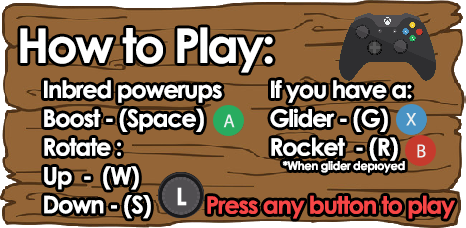
<style>
.page{position:relative;width:466px;height:228px;background:#946537}
.page>*{position:absolute;margin:0}
.t1{font:48px "CenturyGothic-Bold";letter-spacing:-0.05em;color:#ffffff}
.t2{font:24px "CenturyGothic-Bold";letter-spacing:-0.05em;color:#ffffff}
.t3{font:12px "CenturyGothic-Bold";letter-spacing:-0.05em;color:#ffffff}
.t4{font:24px "CenturyGothic-Bold";letter-spacing:-0.05em;color:#f64646}
</style>
<div class="page">
<p class="t1" style="left:20px;top:27px;width:253px;height:46px">How to Play:</p>
<p class="t2" style="left:44px;top:80px;width:178px;height:139px">Inbred powerups<br>Boost - (Space)<br>Rotate :<br>Up  -  (W)<br>Down - (S)</p>
<p class="t2" style="left:270px;top:80px;width:142px;height:81px">If you have a:<br>Glider - (G)<br>Rocket  - (R)</p>
<p class="t3" style="left:282px;top:161px;width:123px;height:12px">*When glider deployed</p>
<p class="t2" style="left:177px;top:187px;width:10px;height:19px">L</p>
<p class="t4" style="left:207px;top:195px;width:248px;height:24px">Press any button to play</p>
</div>
